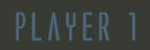
<style>
.page{position:relative;width:150px;height:50px;background:#383b33}
.page>*{position:absolute;margin:0}
.t1{font:36px "AlienLeague";color:#506b85}
</style>
<div class="page">
<p class="t1" style="left:16px;top:12px;width:119px;height:29px">player 1</p>
</div>
